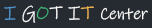
<style>
.page{position:relative;width:152px;height:28px;background:#262a31}
.page>*{position:absolute;margin:0}
.t1{font:17px "InkFree";color:#ffffff}
.t2{font:19px "InkFree";color:#519bd4}
.t3{font:19px "InkFree";color:#ffffff}
.t4{font:19px "InkFree";color:#42b979}
.t5{font:19px "InkFree";color:#f5b952}
</style>
<div class="page">
<p class="t1" style="left:4px;top:5px;width:144px;height:18px"><span class="t2">I</span><span class="t3"> G</span><span class="t4">O</span><span class="t3">T I</span><span class="t5">T </span>Center<span class="t3"> Center</span></p>
</div>
